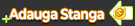
<style>
.page{position:relative;width:135px;height:26px;background:#333333}
.page>*{position:absolute;margin:0}
.t1{font:14.3px "Montserrat-Bold";letter-spacing:-0.04em;color:#ffffff;scale:0.88 1}
</style>
<div class="page">
<p class="t1" style="left:9px;top:8px;width:95px;height:14px">Adauga Stanga</p>
</div>
